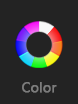
<style>
.page{position:relative;width:78px;height:104px;background:#232323}
.page>*{position:absolute;margin:0}
.t1{font:14px "SegoeUI";color:#7c7c7c;font-weight:bold}
</style>
<div class="page">
<p class="t1" style="left:22px;top:82px;width:35px;height:11px">Color</p>
</div>
